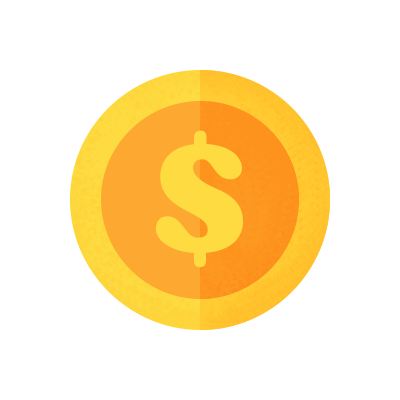
<style>
.page{position:relative;width:400px;height:400px;background:#ffffff}
.page>*{position:absolute;margin:0}
.t1{font:153.8px "Moranga-Black";color:#fddb41}
</style>
<div class="page">
<p class="t1" style="left:155px;top:130px;width:88px;height:138px">$</p>
</div>
